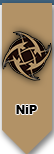
<style>
.page{position:relative;width:54px;height:154px;background:#b29266}
.page>*{position:absolute;margin:0}
.t1{font:11.7px "Arial-Black";letter-spacing:-0.01em;color:#000000}
</style>
<div class="page">
<p class="t1" style="left:16px;top:105px;width:21px;height:9px">NiP</p>
</div>
